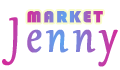
<style>
.page{position:relative;width:120px;height:70px;background:#ffffff}
.page>*{position:absolute;margin:0}
.t1{font:60px "Gabriola";letter-spacing:0.1em;font-weight:bold;scale:0.8 1}
.t2{font:16px "Bauhaus93";letter-spacing:0.1em;font-weight:bold;scale:1.11 1}
</style>
<div class="page">
<p class="t1" style="left:2px;top:17px;width:116px;height:50px">Jenny</p>
<p class="t2" style="left:27px;top:11px;width:76px;height:12px">MARKET</p>
</div>
